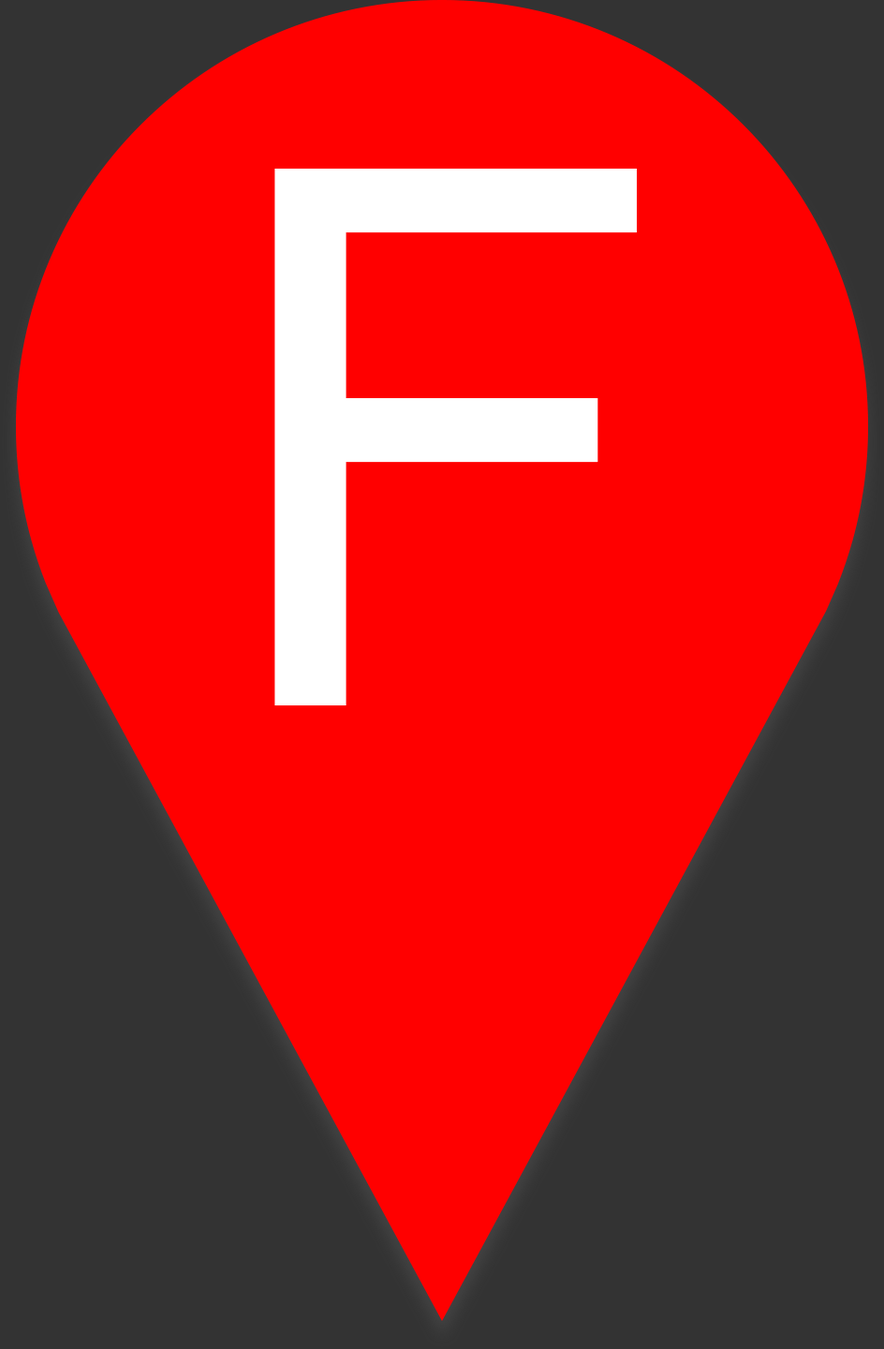
<style>
.page{position:relative;width:884px;height:1349px;background:#ff0000}
.page>*{position:absolute;margin:0}
.t1{font:749.3px "ArialMT";color:#ffffff}
</style>
<div class="page">
<p class="t1" style="left:274px;top:169px;width:363px;height:536px">F</p>
</div>
